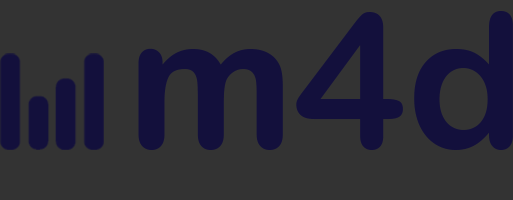
<style>
.page{position:relative;width:513px;height:200px;background:#333333}
.page>*{position:absolute;margin:0}
.t1{font:188.5px "ArialRoundedMTBold";color:#13103c}
</style>
<div class="page">
<p class="t1" style="left:138px;top:11px;width:375px;height:139px">m4d</p>
</div>
